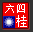
<style>
.page{position:relative;width:33px;height:32px;background:#f20000}
.page>*{position:absolute;margin:0}
.t1{font:10.4px "SimSun";color:#ffffff}
.t2{font:11.7px "SimSun";color:#ffffff}
</style>
<div class="page">
<p class="t1" style="left:5px;top:4px;width:20px;height:9px">六四</p>
<p class="t2" style="left:16px;top:15px;width:11px;height:12px">桂</p>
</div>
